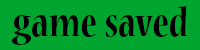
<style>
.page{position:relative;width:200px;height:50px;background:#00a52f}
.page>*{position:absolute;margin:0}
.t1{font:44px "NuevaStd-BoldCond";color:#000000}
</style>
<div class="page">
<p class="t1" style="left:12px;top:6px;width:176px;height:39px">game saved</p>
</div>
